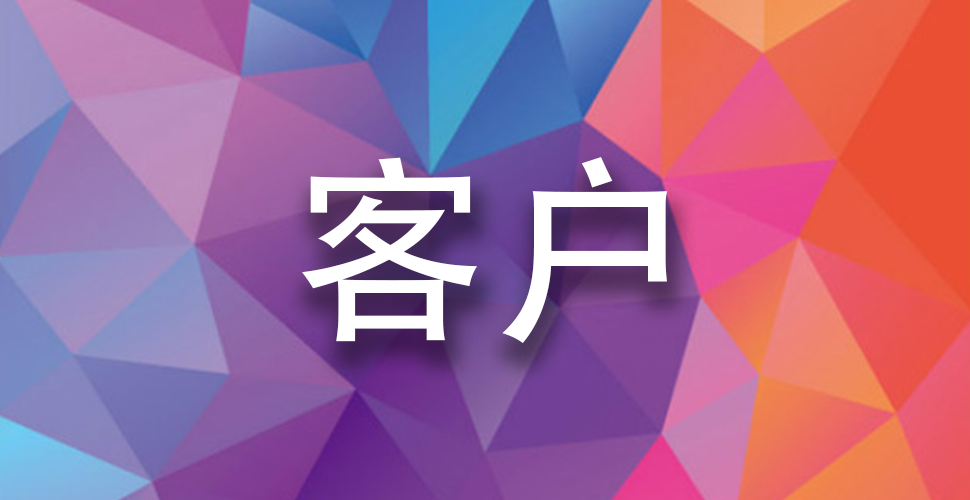
<style>
.page{position:relative;width:970px;height:500px}
.page>*{position:absolute;margin:0}
.t1{font:200.3px "AdobeHeitiStd-Regular";color:#ffffff}
</style>
<div class="page">
<p class="t1" style="left:302px;top:157px;width:366px;height:186px">客户</p>
</div>
